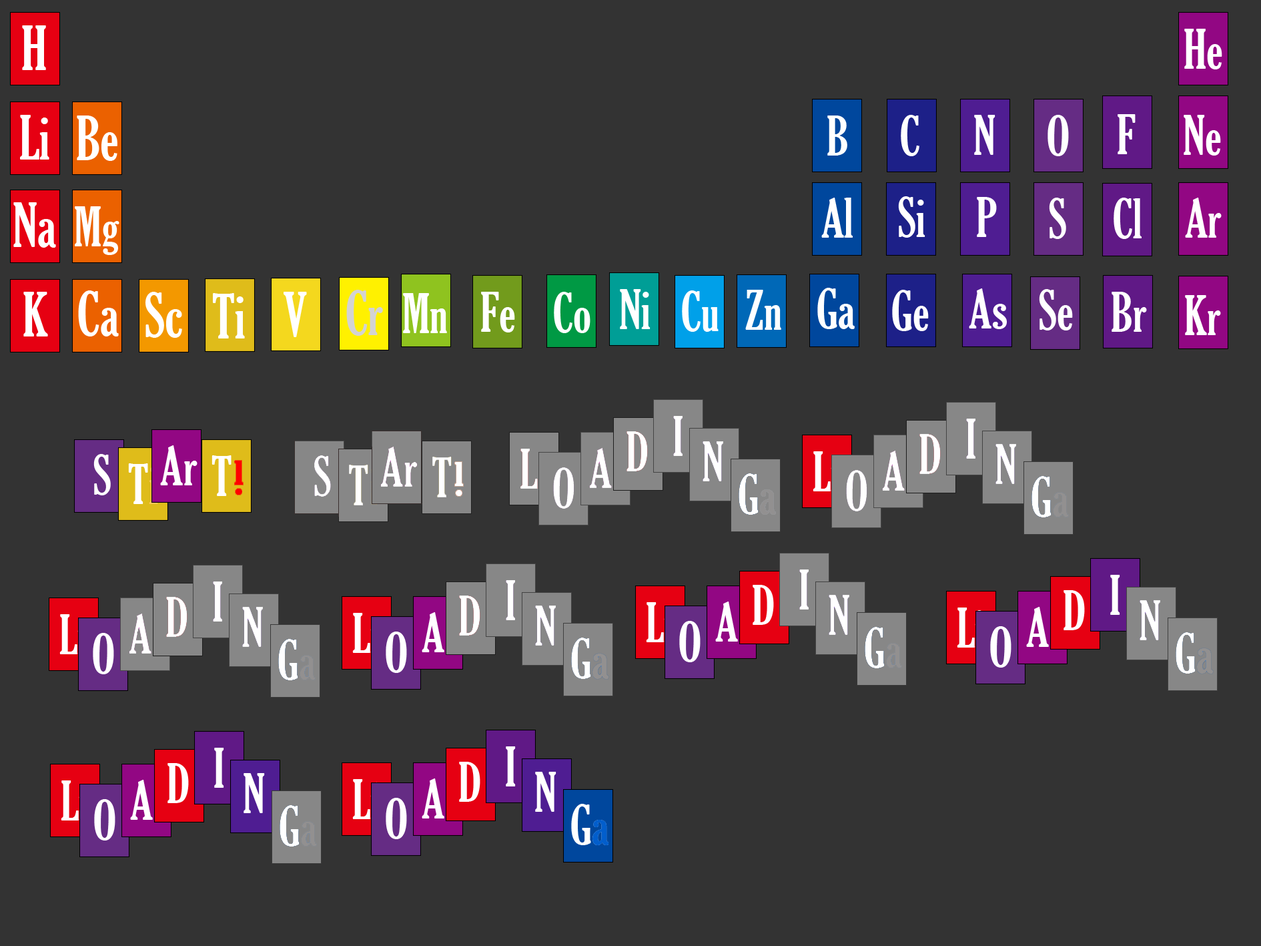
<style>
.page{position:relative;width:1261px;height:946px;background:#333333}
.page>*{position:absolute;margin:0}
.t1{font:58.4px "GloucesterMT-ExtraCondensed";color:#ffffff}
.t2{font:52.8px "GloucesterMT-ExtraCondensed";color:#ffffff}
.t3{font:58.4px "GloucesterMT-ExtraCondensed";color:#d3d3d3}
</style>
<div class="page">
<p class="t1" style="left:22px;top:25px;width:24px;height:45px">H</p>
<p class="t2" style="left:1184px;top:29px;width:38px;height:40px">He</p>
<p class="t1" style="left:20px;top:115px;width:29px;height:44px">Li</p>
<p class="t1" style="left:77px;top:115px;width:40px;height:46px">Be</p>
<p class="t2" style="left:827px;top:115px;width:20px;height:40px">B</p>
<p class="t2" style="left:901px;top:115px;width:18px;height:41px">C</p>
<p class="t2" style="left:974px;top:115px;width:22px;height:40px">N</p>
<p class="t2" style="left:1048px;top:115px;width:21px;height:41px">O</p>
<p class="t2" style="left:1118px;top:114px;width:18px;height:40px">F</p>
<p class="t2" style="left:1184px;top:115px;width:37px;height:40px">Ne</p>
<p class="t2" style="left:821px;top:198px;width:32px;height:40px">Al</p>
<p class="t2" style="left:898px;top:196px;width:28px;height:42px">Si</p>
<p class="t2" style="left:977px;top:197px;width:20px;height:40px">P</p>
<p class="t2" style="left:1049px;top:198px;width:17px;height:41px">S</p>
<p class="t2" style="left:1114px;top:198px;width:28px;height:41px">Cl</p>
<p class="t2" style="left:1185px;top:198px;width:37px;height:40px">Ar</p>
<p class="t1" style="left:13px;top:202px;width:43px;height:46px">Na</p>
<p class="t2" style="left:75px;top:206px;width:44px;height:49px">Mg</p>
<p class="t1" style="left:23px;top:292px;width:25px;height:44px">K</p>
<p class="t1" style="left:78px;top:290px;width:41px;height:46px">Ca</p>
<p class="t1" style="left:145px;top:292px;width:37px;height:46px">Sc</p>
<p class="t1" style="left:213px;top:293px;width:32px;height:45px">Ti</p>
<p class="t1" style="left:284px;top:292px;width:23px;height:45px">V</p>
<p class="t3" style="left:346px;top:290px;width:37px;height:46px">Cr</p>
<p class="t2" style="left:403px;top:293px;width:44px;height:40px">Mn</p>
<p class="t2" style="left:481px;top:292px;width:34px;height:40px">Fe</p>
<p class="t2" style="left:554px;top:292px;width:37px;height:41px">Co</p>
<p class="t2" style="left:620px;top:289px;width:31px;height:40px">Ni</p>
<p class="t2" style="left:682px;top:290px;width:37px;height:42px">Cu</p>
<p class="t2" style="left:745px;top:290px;width:36px;height:40px">Zn</p>
<p class="t2" style="left:817px;top:288px;width:38px;height:41px">Ga</p>
<p class="t2" style="left:892px;top:290px;width:37px;height:41px">Ge</p>
<p class="t2" style="left:969px;top:288px;width:38px;height:41px">As</p>
<p class="t2" style="left:1039px;top:289px;width:34px;height:41px">Se</p>
<p class="t2" style="left:1112px;top:292px;width:35px;height:40px">Br</p>
<p class="t2" style="left:1185px;top:295px;width:36px;height:40px">Kr</p>
</div>
